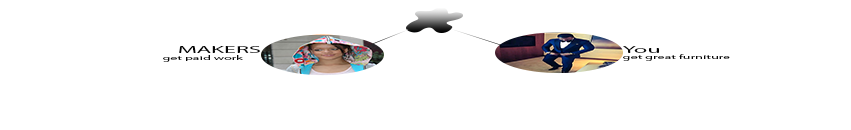
<style>
.page{position:relative;width:851px;height:130px;background:#ffffff}
.page>*{position:absolute;margin:0}
.t1{font:9.9px "MyriadPro-Regular";color:#050505;scale:2.42 1}
.t2{font:5.8px "MyriadPro-Regular";color:#050505;scale:2.42 1}
</style>
<div class="page">
<p class="t1" style="left:179px;top:46px;width:81px;height:7px">MAKERS</p>
<p class="t1" style="left:623px;top:46px;width:36px;height:7px">You</p>
<p class="t2" style="left:623px;top:54px;width:107px;height:7px">get great furniture</p>
<p class="t2" style="left:163px;top:55px;width:80px;height:7px">get paid work</p>
</div>
